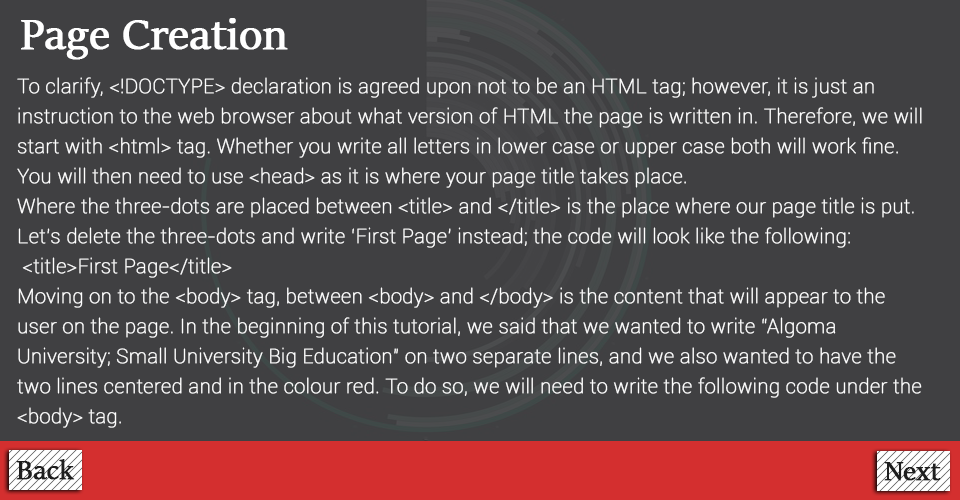
<style>
.page{position:relative;width:960px;height:500px;background:#404042}
.page>*{position:absolute;margin:0}
.t1{font:48px "SitkaBanner";color:#ffffff;font-weight:bold}
.t2{font:20px/30px "Roboto-Thin";color:#ffffff;font-weight:bold}
.t3{font:30px "SitkaBanner";color:#1e1e1e;font-weight:bold}
</style>
<div class="page">
<p class="t1" style="left:21px;top:18px;width:267px;height:42px">Page Creation</p>
<p class="t2" style="left:17px;top:77px;width:905px;height:351px">To clarify, &lt;!DOCTYPE&gt; declaration is agreed upon not to be an HTML tag; however, it is just an instruction to the web browser about what version of HTML the page is written in. Therefore, we will start with &lt;html&gt; tag. Whether you write all letters in lower case or upper case both will work fine. You will then need to use &lt;head&gt; as it is where your page title takes place.<br>Where the three-dots are placed between &lt;title&gt; and &lt;/title&gt; is the place where our page title is put. Let’s delete the three-dots and write ‘First Page’ instead; the code will look like the following:<br> &lt;title&gt;First Page&lt;/title&gt;<br>Moving on to the &lt;body&gt; tag, between &lt;body&gt; and &lt;/body&gt; is the content that will appear to the user on the page. In the beginning of this tutorial, we said that we wanted to write “Algoma University; Small University Big Education” on two separate lines, and we also wanted to have the two lines centered and in the colour red. To do so, we will need to write the following code under the &lt;body&gt; tag.</p>
<p class="t3" style="left:16px;top:459px;width:59px;height:21px">Back</p>
<p class="t3" style="left:884px;top:462px;width:57px;height:19px">Next</p>
</div>
